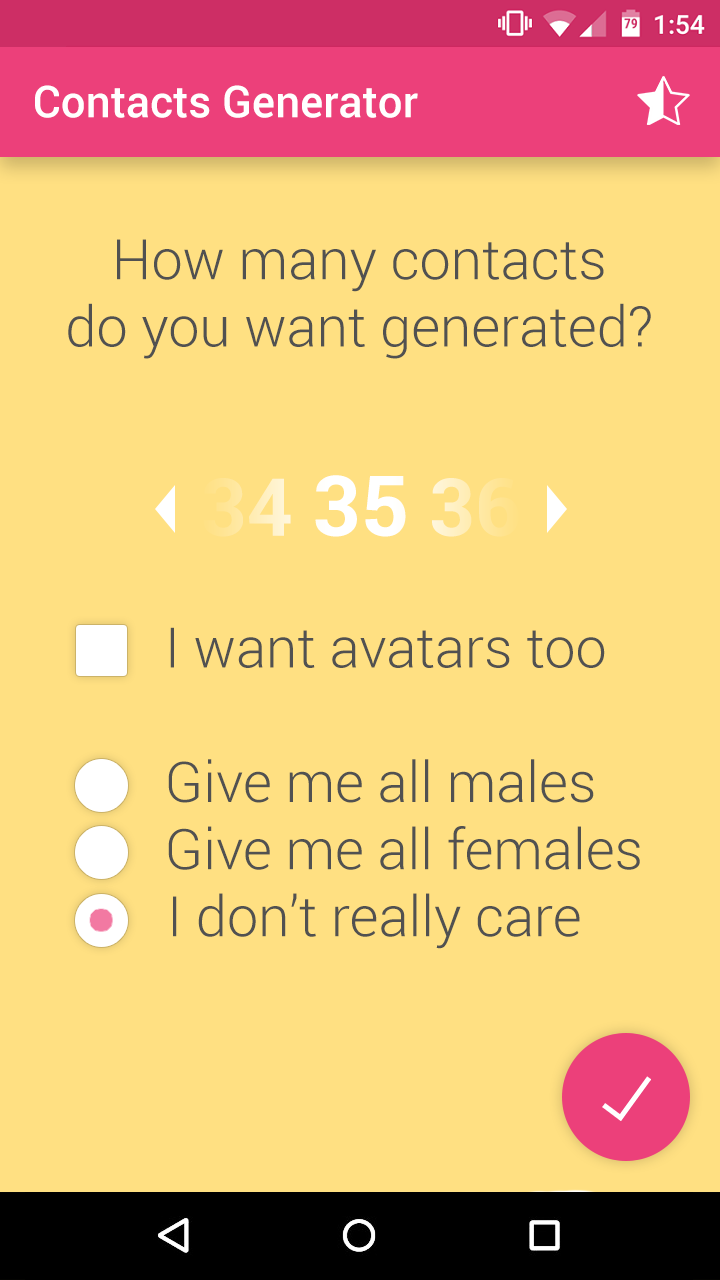
<style>
.page{position:relative;width:720px;height:1280px;background:#ffe082}
.page>*{position:absolute;margin:0}
.t1{font:44px "Roboto-Medium";color:#ffffff}
.t2{font:56px "Roboto-Light";color:#515151}
.t3{font:80.1px "Roboto-Bold"}
.t4{font:84.1px "Roboto-Bold"}
</style>
<div class="page">
<p class="t1" style="left:35px;top:85px;width:383px;height:33px">Contacts Generator</p>
<p class="t2" style="left:68px;top:239px;width:583px;height:120px;text-align:center">How many contacts<br>do you want generated?</p>
<p class="t3" style="left:203px;top:475px;width:316px;height:62px">34 <span class="t4">35</span> 36</p>
<p class="t2" style="left:168px;top:627px;width:472px;height:322px">I want avatars too<br><br>Give me all males<br>Give me all females<br> I don’t really care</p>
</div>
